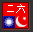
<style>
.page{position:relative;width:33px;height:32px;background:#f20000}
.page>*{position:absolute;margin:0}
.t1{font:10.4px "SimSun";color:#ffffff}
</style>
<div class="page">
<p class="t1" style="left:7px;top:4px;width:18px;height:9px">二六</p>
</div>
